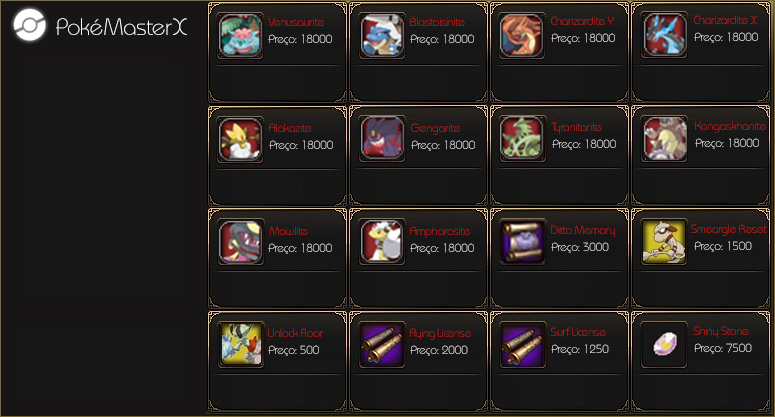
<style>
.page{position:relative;width:775px;height:417px;background:#171717}
.page>*{position:absolute;margin:0}
.t1{font:12px "MonaKo";letter-spacing:-0.01em}
</style>
<div class="page">
<p class="t1" style="left:268px;top:17px;width:56px;height:9px">Venusaurite</p>
<p class="t1" style="left:410px;top:17px;width:55px;height:9px">Blastoisinite</p>
<p class="t1" style="left:551px;top:16px;width:63px;height:9px">Charizardite Y</p>
<p class="t1" style="left:694px;top:15px;width:64px;height:9px">Charizardite X</p>
<p class="t1" style="left:268px;top:34px;width:64px;height:11px">Preço: 18000</p>
<p class="t1" style="left:410px;top:34px;width:64px;height:11px">Preço: 18000</p>
<p class="t1" style="left:551px;top:33px;width:64px;height:11px">Preço: 18000</p>
<p class="t1" style="left:694px;top:32px;width:64px;height:11px">Preço: 18000</p>
<p class="t1" style="left:269px;top:123px;width:43px;height:9px">Alakazite</p>
<p class="t1" style="left:411px;top:123px;width:49px;height:12px">Gengarite</p>
<p class="t1" style="left:551px;top:122px;width:51px;height:12px">Tyranitarite</p>
<p class="t1" style="left:695px;top:121px;width:71px;height:12px">Kangaskhanite</p>
<p class="t1" style="left:269px;top:140px;width:64px;height:11px">Preço: 18000</p>
<p class="t1" style="left:411px;top:140px;width:64px;height:11px">Preço: 18000</p>
<p class="t1" style="left:552px;top:139px;width:64px;height:11px">Preço: 18000</p>
<p class="t1" style="left:695px;top:138px;width:64px;height:11px">Preço: 18000</p>
<p class="t1" style="left:269px;top:226px;width:39px;height:10px">Mawlite</p>
<p class="t1" style="left:410px;top:226px;width:60px;height:12px">Ampharosite</p>
<p class="t1" style="left:551px;top:225px;width:64px;height:12px">Ditto Memory</p>
<p class="t1" style="left:691px;top:224px;width:76px;height:12px">Smeargle Reset</p>
<p class="t1" style="left:268px;top:243px;width:64px;height:11px">Preço: 18000</p>
<p class="t1" style="left:410px;top:243px;width:64px;height:11px">Preço: 18000</p>
<p class="t1" style="left:551px;top:242px;width:58px;height:11px">Preço: 3000</p>
<p class="t1" style="left:694px;top:241px;width:58px;height:11px">Preço: 1500</p>
<p class="t1" style="left:268px;top:328px;width:56px;height:9px">Unlock Floor</p>
<p class="t1" style="left:410px;top:328px;width:61px;height:12px">Flying License</p>
<p class="t1" style="left:551px;top:327px;width:55px;height:9px">Surf License</p>
<p class="t1" style="left:694px;top:326px;width:55px;height:12px">Shiny Stone</p>
<p class="t1" style="left:268px;top:345px;width:51px;height:11px">Preço: 500</p>
<p class="t1" style="left:410px;top:345px;width:58px;height:11px">Preço: 2000</p>
<p class="t1" style="left:551px;top:344px;width:58px;height:11px">Preço: 1250</p>
<p class="t1" style="left:694px;top:343px;width:58px;height:11px">Preço: 7500</p>
</div>
